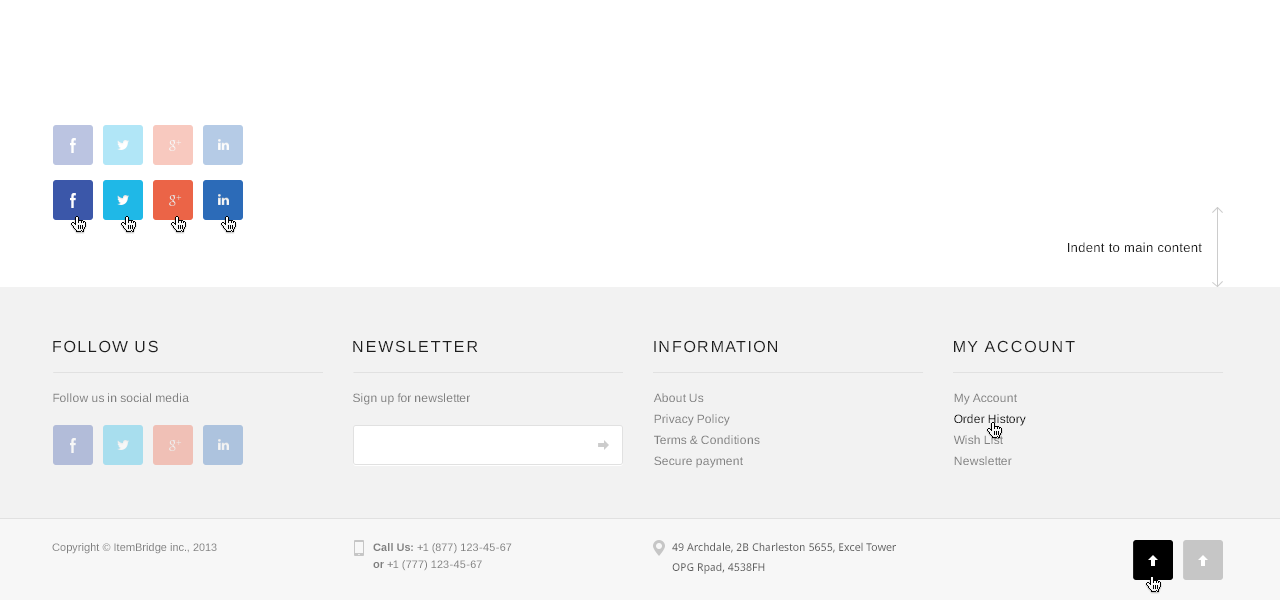
<style>
.page{position:relative;width:1280px;height:600px;background:#ffffff}
.page>*{position:absolute;margin:0}
.t1{font:13px "Arimo";letter-spacing:0.025em;color:#1e1e1e}
.t2{font:16px "Arimo";letter-spacing:0.1em;color:#1e1e1e;text-transform:uppercase}
.t3{font:12px "Arimo";color:#7f7f7f}
.t4{font:12px/21px "Arimo";color:#7f7f7f}
.t5{font:12px/21px "Arimo";color:#000000}
.t6{font:11px "Arimo";color:#7f7f7f}
.t7{font:11px/17px "Arimo";color:#7f7f7f}
.t8{font:11px/17px "Arimo-Bold";color:#7f7f7f}
.t9{font:11px/20px "DroidSans";color:#5f5f5f}
</style>
<div class="page">
<p class="t1" style="left:1068px;top:242px;width:134px;height:10px">Indent to main content</p>
<p class="t2" style="left:53px;top:340px;width:105px;height:13px">Follow Us</p>
<p class="t2" style="left:353px;top:340px;width:125px;height:13px">Newsletter</p>
<p class="t2" style="left:654px;top:340px;width:123px;height:13px">Information</p>
<p class="t2" style="left:954px;top:340px;width:121px;height:13px">My Account</p>
<p class="t3" style="left:53px;top:393px;width:136px;height:9px">Follow us in social media</p>
<p class="t3" style="left:353px;top:393px;width:117px;height:12px">Sign up for newsletter</p>
<p class="t4" style="left:653px;top:393px;width:107px;height:75px">About Us<br>Privacy Policy<br>Terms &amp; Conditions<br>Secure payment</p>
<p class="t4" style="left:953px;top:393px;width:73px;height:72px">My Account<br><span class="t5">Order History<br></span>Wish List<br>Newsletter</p>
<p class="t6" style="left:52px;top:543px;width:165px;height:11px">Copyright © ItemBridge inc., 2013</p>
<p class="t7" style="left:373px;top:543px;width:139px;height:28px"><span class="t8">Call Us: </span>+1 (877) 123-45-67<br><span class="t8">or</span> +1 (777) 123-45-67</p>
<p class="t9" style="left:672px;top:542px;width:224px;height:32px">49 Archdale, 2B Charleston 5655, Excel Tower<br>OPG Rpad, 4538FH</p>
</div>
